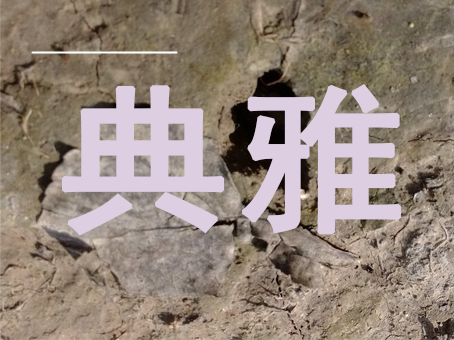
<style>
.page{position:relative;width:454px;height:340px}
.page>*{position:absolute;margin:0}
.t1{font:160px "SimHei";color:#ddcee1;font-weight:bold;scale:1.1 1}
</style>
<div class="page">
<p class="t1" style="left:62px;top:83px;width:339px;height:153px">典雅</p>
</div>
